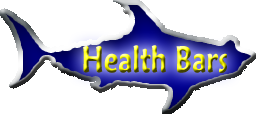
<style>
.page{position:relative;width:256px;height:114px;background:#ffffff}
.page>*{position:absolute;margin:0}
.t1{font:37px "MaiandraGD-DemiBold";scale:0.71 1}
</style>
<div class="page">
<p class="t1" style="left:83px;top:45px;width:144px;height:28px">Health Bars</p>
</div>
